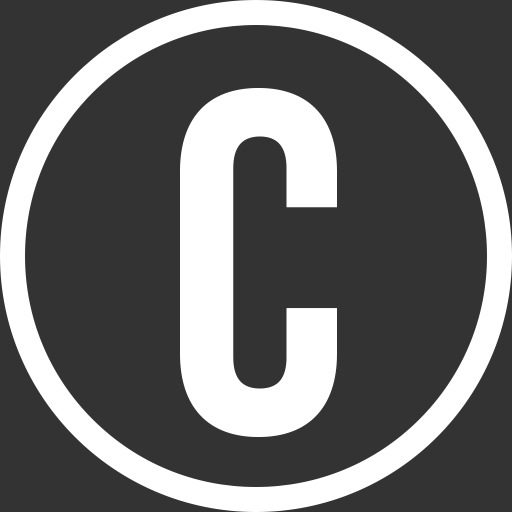
<style>
.page{position:relative;width:512px;height:512px;background:#333333}
.page>*{position:absolute;margin:0}
.t1{font:484.5px "BebasNeuePro-Bold";color:#ffffff}
</style>
<div class="page">
<p class="t1" style="left:180px;top:87px;width:157px;height:350px">C</p>
</div>
